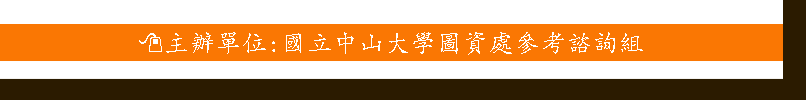
<style>
.page{position:relative;width:806px;height:100px;background:#ffffff}
.page>*{position:absolute;margin:0}
.t1{font:25px "KaiTi";color:#ffffff}
.t2{font:25px "Wingdings2";color:#ffffff}
</style>
<div class="page">
<p class="t1" style="left:139px;top:32px;width:504px;height:23px"><span class="t2">:</span>主辦單位:國立中山大學圖資處參考諮詢組</p>
</div>
